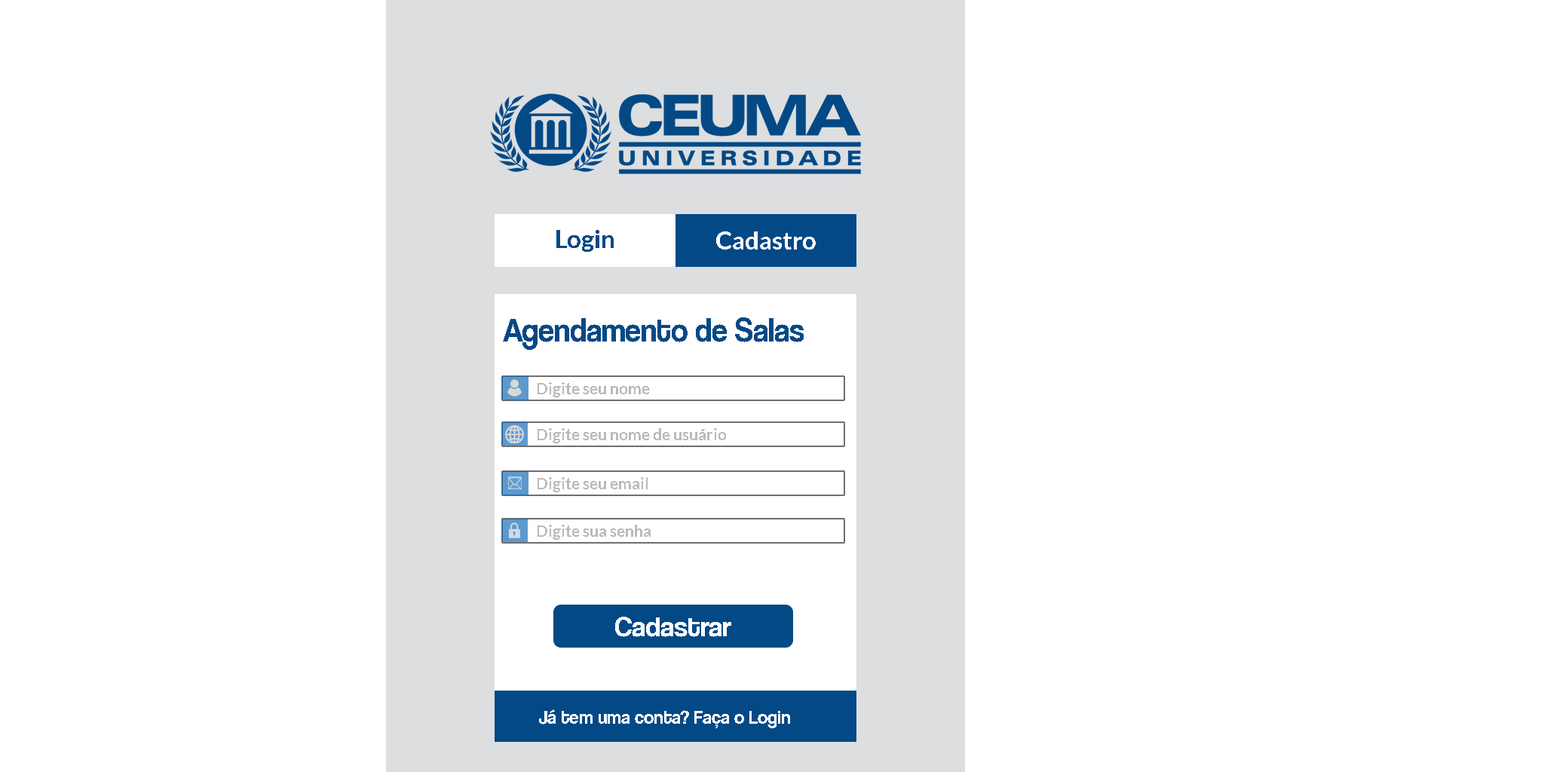
<style>
.page{position:relative;width:1544px;height:772px;background:#ffffff}
.page>*{position:absolute;margin:0}
.t1{font:25.1px "Lato-Bold";color:#034986}
.t2{font:25.1px "Lato-Bold";color:#ffffff}
.t3{font:34.3px "CoolveticaRg-Regular";color:#034986;scale:0.92 1}
.t4{font:15.7px "Lato-Bold";color:#bababa}
.t5{font:28.3px "CoolveticaRg-Regular";color:#ffffff}
.t6{font:18.9px "CoolveticaRg-Regular";color:#ffffff}
</style>
<div class="page">
<p class="t1" style="left:556px;top:230px;width:58px;height:22px">Login</p>
<p class="t2" style="left:716px;top:231px;width:100px;height:19px">Cadastro</p>
<p class="t3" style="left:503px;top:317px;width:301px;height:33px">Agendamento de Salas</p>
<p class="t4" style="left:538px;top:382px;width:112px;height:15px">Digite seu nome</p>
<p class="t4" style="left:538px;top:428px;width:188px;height:15px">Digite seu nome de usuário</p>
<p class="t4" style="left:538px;top:477px;width:110px;height:15px">Digite seu email</p>
<p class="t4" style="left:538px;top:525px;width:113px;height:15px">Digite sua senha</p>
<p class="t5" style="left:615px;top:617px;width:116px;height:20px">Cadastrar</p>
<p class="t6" style="left:539px;top:710px;width:251px;height:18px">Já tem uma conta? Faça o Login</p>
</div>
